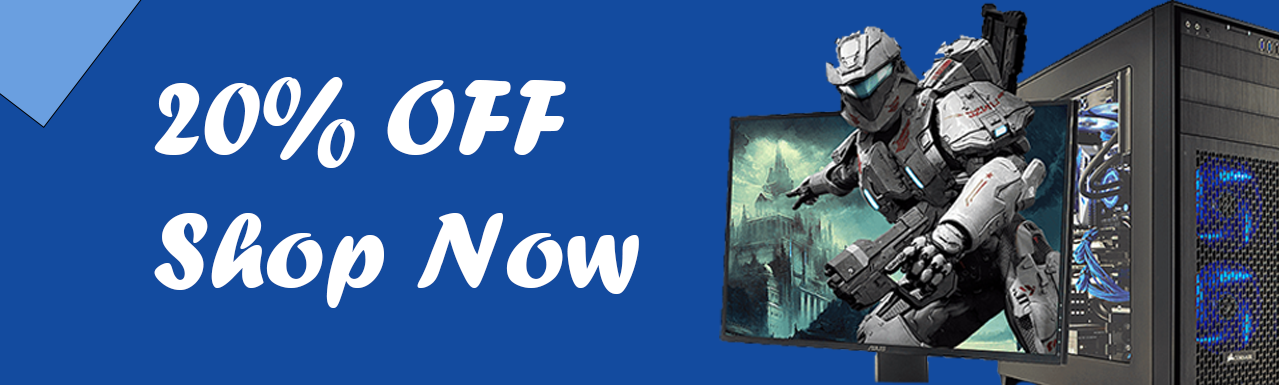
<style>
.page{position:relative;width:1279px;height:385px;background:#134b9f}
.page>*{position:absolute;margin:0}
.t1{font:111.1px "ForteMT";color:#ffffff}
</style>
<div class="page">
<p class="t1" style="left:154px;top:77px;width:485px;height:231px">20% OFF <br>Shop Now</p>
</div>
